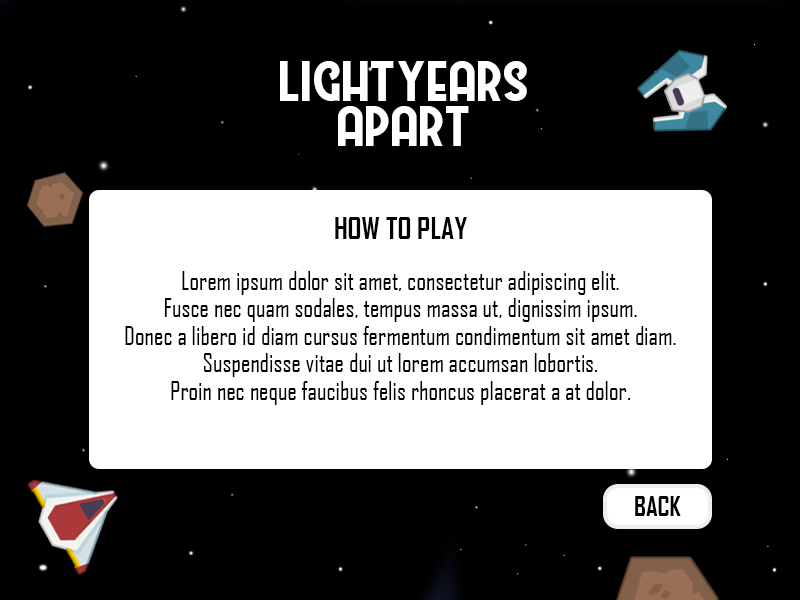
<style>
.page{position:relative;width:800px;height:600px;background:#000000}
.page>*{position:absolute;margin:0}
.t1{font:56.9px/44.8px "Westmeath";color:#ffffff}
.t2{font:29.2px "AgencyFB-Bold";color:#000000}
.t3{font:25px/27.5px "AgencyFB-Reg";color:#000000}
.t4{font:25.7px "AgencyFB-Bold";color:#000000}
</style>
<div class="page">
<p class="t1" style="left:280px;top:61px;width:247px;height:85px;text-align:center">lightyears<br>apart</p>
<p class="t2" style="left:335px;top:217px;width:132px;height:22px">HOW TO PLAY</p>
<p class="t3" style="left:125px;top:271px;width:551px;height:134px;text-align:center">Lorem ipsum dolor sit amet, consectetur adipiscing elit.<br>Fusce nec quam sodales, tempus massa ut, dignissim ipsum.<br>Donec a libero id diam cursus fermentum condimentum sit amet diam.<br>Suspendisse vitae dui ut lorem accumsan lobortis.<br>Proin nec neque faucibus felis rhoncus placerat a at dolor.</p>
<p class="t4" style="left:635px;top:496px;width:46px;height:20px">BACK</p>
</div>
